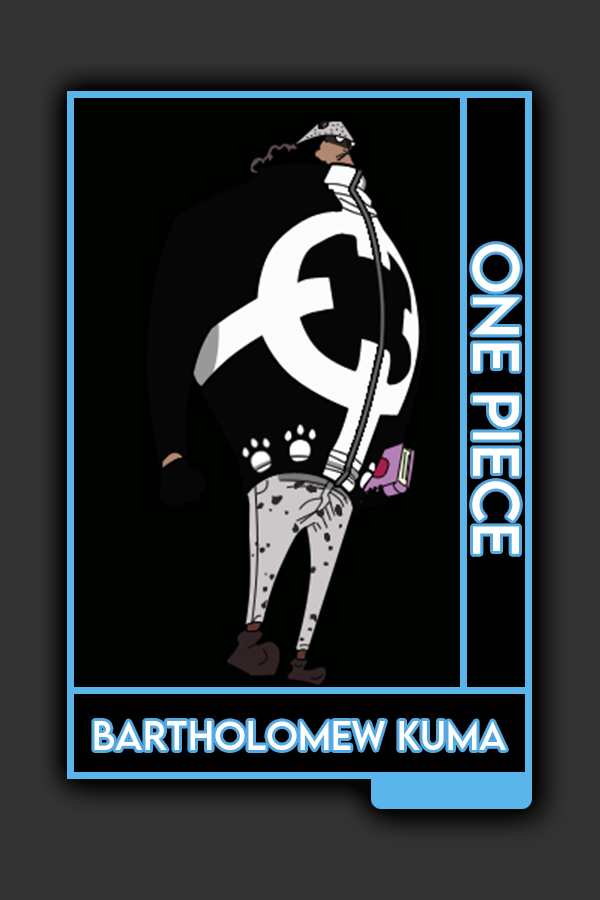
<style>
.page{position:relative;width:600px;height:900px;background:#000200}
.page>*{position:absolute;margin:0}
.t1{font:58.4px "LEMONMILK-Regular";color:#ffffff}
.t2{font:35.7px "LEMONMILK-Regular";color:#ffffff}
</style>
<div class="page">
<p class="t1" style="left:472px;top:244px;width:48px;height:310px;rotate:90deg">One Piece</p>
<p class="t2" style="left:94px;top:721px;width:412px;height:29px">Bartholomew Kuma</p>
</div>
